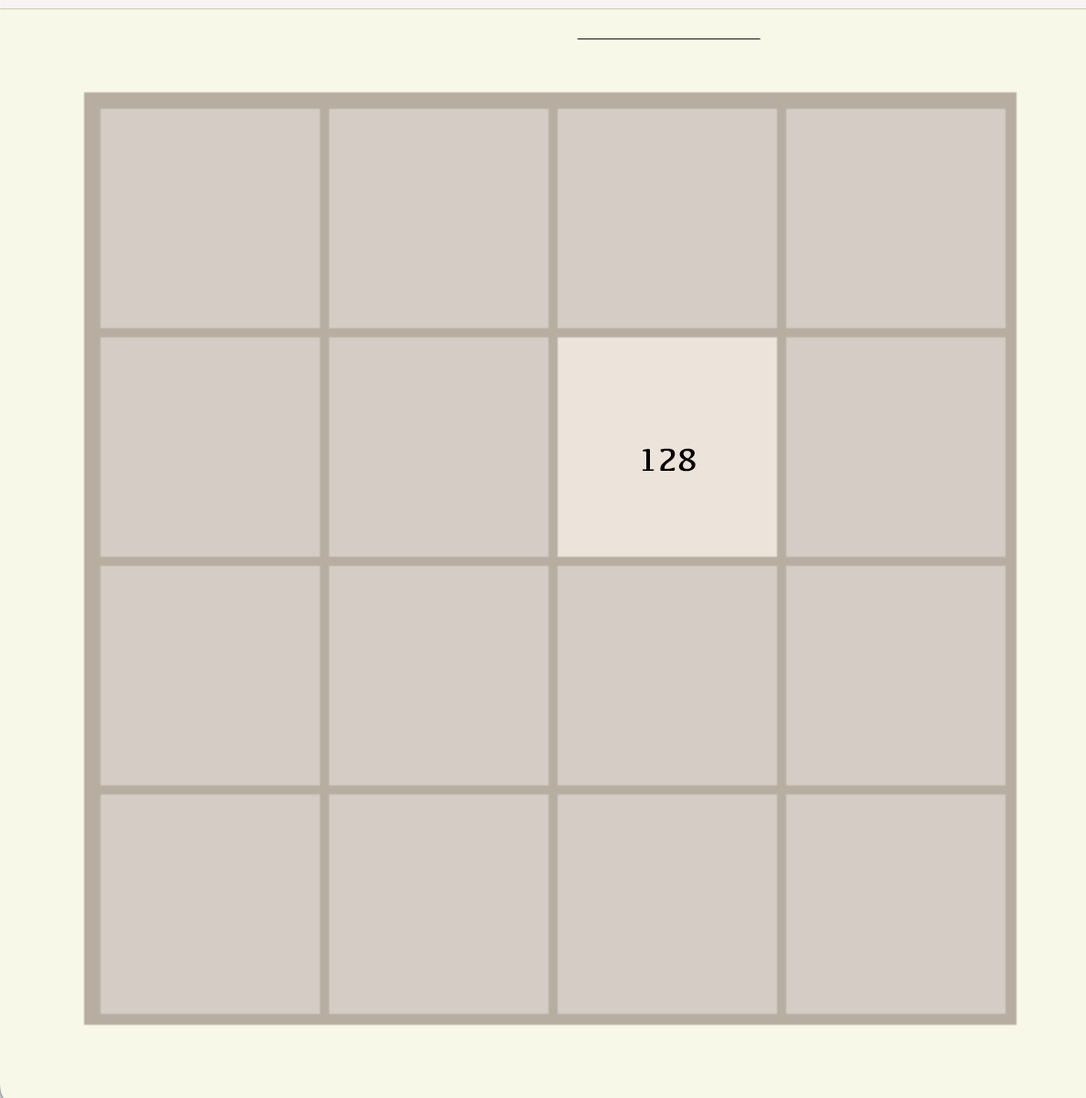
<style>
.page{position:relative;width:1086px;height:1098px;background:#d5cdc5}
.page>*{position:absolute;margin:0}
.t1{font:32.9px "Kefa-Regular";color:#000000}
</style>
<div class="page">
<p class="t1" style="left:642px;top:448px;width:54px;height:24px">128</p>
</div>
